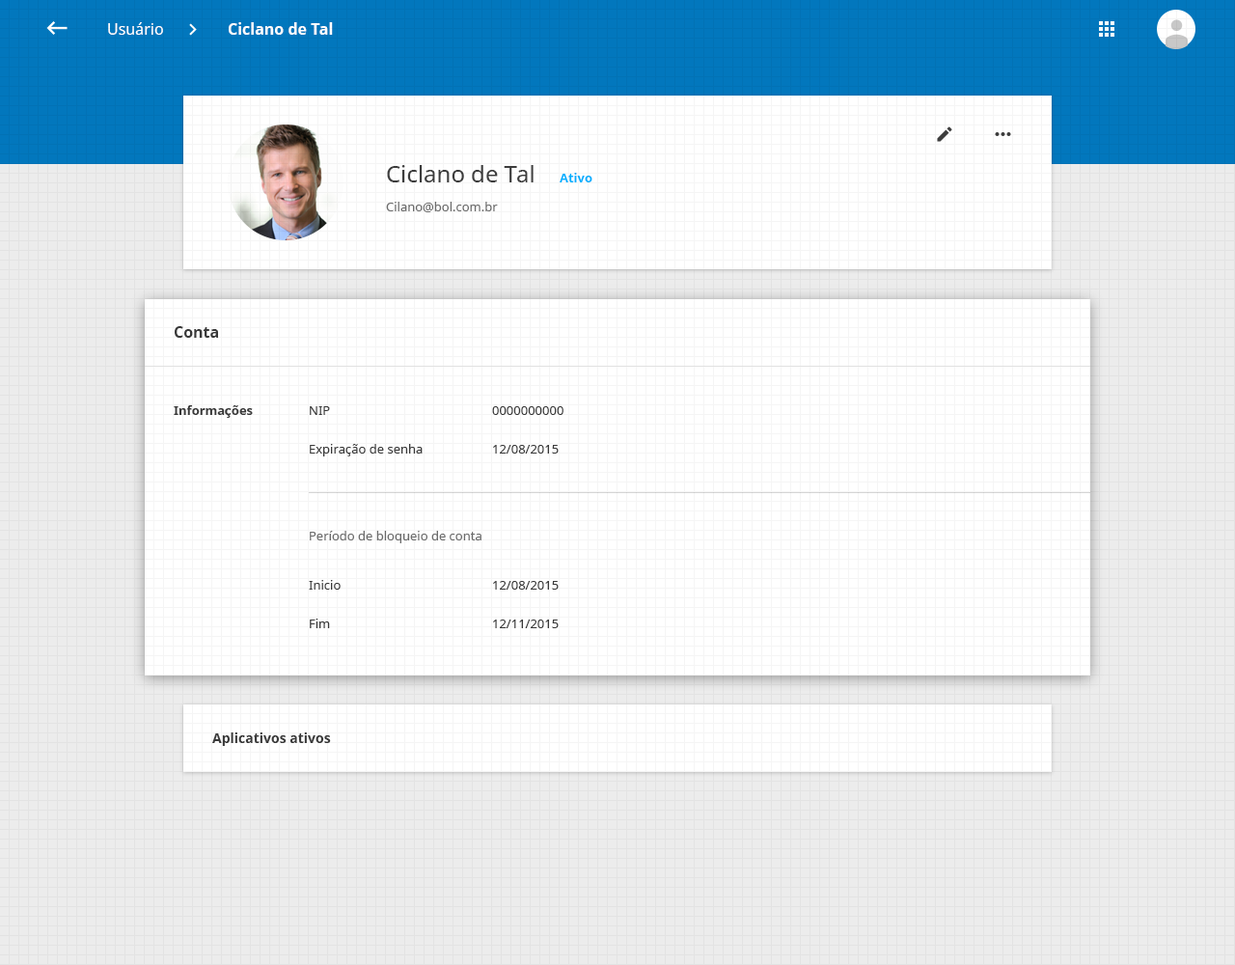
<style>
.page{position:relative;width:1235px;height:965px}
.page>*{position:absolute;margin:0}
.t1{font:15.4px "NotoSans";color:#ffffff}
.t2{font:15.4px "NotoSans-Bold";color:#ffffff}
.t3{font:23.2px "NotoSans";color:#3d3d3d}
.t4{font:12.5px "NotoSans-Bold";color:#00b0ff}
.t5{font:12.5px "NotoSans";color:#6c6c6c}
.t6{font:15.4px "NotoSans-Bold";color:#393939}
.t7{font:12.5px "NotoSans-Bold";color:#393939}
.t8{font:12.5px "NotoSans";color:#393939}
.t9{font:13.5px "NotoSans-Bold";color:#393939}
</style>
<div class="page">
<p class="t1" style="left:108px;top:22px;width:55px;height:13px">Usuário</p>
<p class="t2" style="left:229px;top:22px;width:104px;height:13px">Ciclano de Tal</p>
<p class="t3" style="left:387px;top:165px;width:147px;height:17px">Ciclano de Tal</p>
<p class="t4" style="left:560px;top:173px;width:33px;height:9px">Ativo</p>
<p class="t5" style="left:386px;top:202px;width:112px;height:10px">Cilano@bol.com.br</p>
<p class="t6" style="left:175px;top:326px;width:43px;height:12px">Conta</p>
<p class="t7" style="left:174px;top:405px;width:79px;height:13px">Informações</p>
<p class="t8" style="left:310px;top:406px;width:20px;height:9px">NIP</p>
<p class="t8" style="left:492px;top:406px;width:72px;height:9px">0000000000</p>
<p class="t8" style="left:310px;top:444px;width:113px;height:13px">Expiração de senha</p>
<p class="t8" style="left:493px;top:445px;width:66px;height:9px">12/08/2015</p>
<p class="t5" style="left:310px;top:531px;width:172px;height:12px">Período de bloqueio de conta</p>
<p class="t8" style="left:309px;top:580px;width:32px;height:10px">Inicio</p>
<p class="t8" style="left:493px;top:581px;width:66px;height:9px">12/08/2015</p>
<p class="t8" style="left:310px;top:619px;width:20px;height:9px">Fim</p>
<p class="t8" style="left:493px;top:620px;width:66px;height:8px">12/11/2015</p>
<p class="t9" style="left:212px;top:733px;width:119px;height:13px">Aplicativos ativos</p>
</div>
